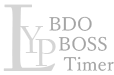
<style>
.page{position:relative;width:114px;height:75px;background:#ffffff}
.page>*{position:absolute;margin:0}
.t1{font:100.3px "CalifornianFB-Reg";color:#d5d5d5}
.t2{font:18.5px/19.8px "YuMincho-Regular";color:#a4a4a4}
.t3{font:41.3px "CalifornianFB-Reg";color:#d5d5d5}
</style>
<div class="page">
<p class="t1" style="left:3px;top:4px;width:52px;height:67px">L</p>
<p class="t2" style="left:49px;top:16px;width:65px;height:55px">BDO<br>  BOSS<br>   Timer</p>
<p class="t3" style="left:19px;top:26px;width:24px;height:27px">Y</p>
<p class="t3" style="left:35px;top:39px;width:21px;height:27px">P</p>
</div>
